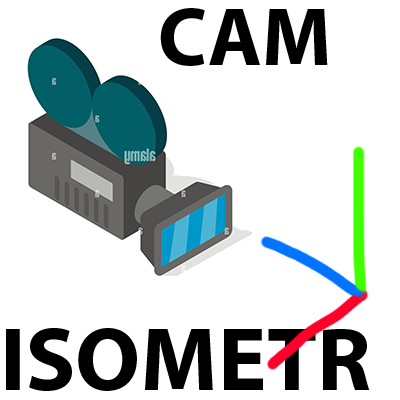
<style>
.page{position:relative;width:400px;height:400px;background:#ffffff}
.page>*{position:absolute;margin:0}
.t1{font:82.4px "MyriadPro-Bold";color:#000000}
.t2{font:91.1px "MyriadPro-Bold";color:#000000}
</style>
<div class="page">
<p class="t1" style="left:160px;top:8px;width:168px;height:58px">CAM</p>
<p class="t2" style="left:6px;top:328px;width:364px;height:63px">ISOMETR</p>
</div>
